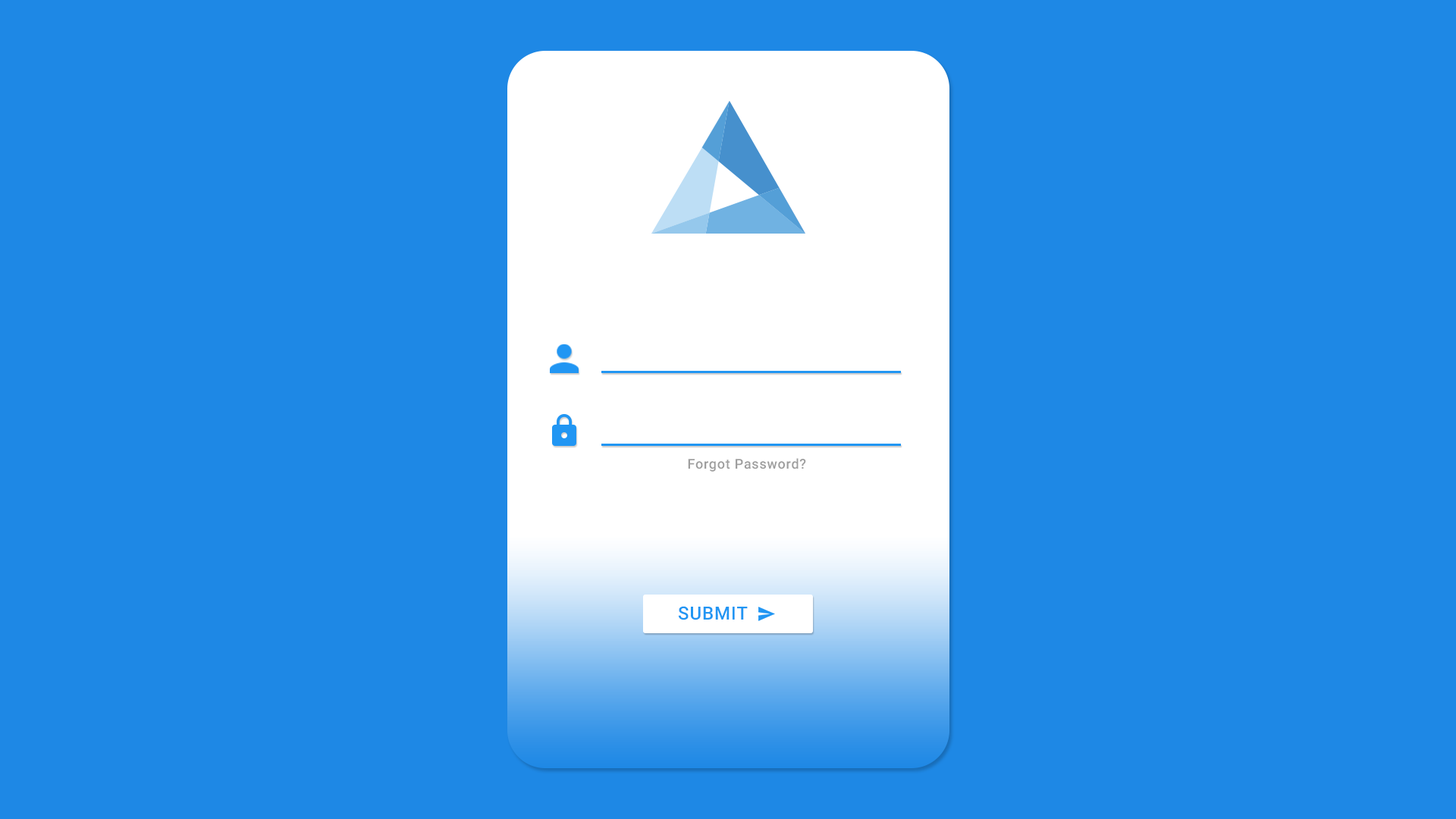
<style>
.page{position:relative;width:1456px;height:819px;background:#1e88e5}
.page>*{position:absolute;margin:0}
.t1{font:13.6px "Roboto-Medium";letter-spacing:0.041em;color:#9e9e9e}
.t2{font:18.2px "Roboto-Medium";letter-spacing:0.041em;color:#2196f3}
</style>
<div class="page">
<p class="t1" style="left:688px;top:458px;width:118px;height:14px">Forgot Password?</p>
<p class="t2" style="left:678px;top:606px;width:70px;height:14px">SUBMIT</p>
</div>
